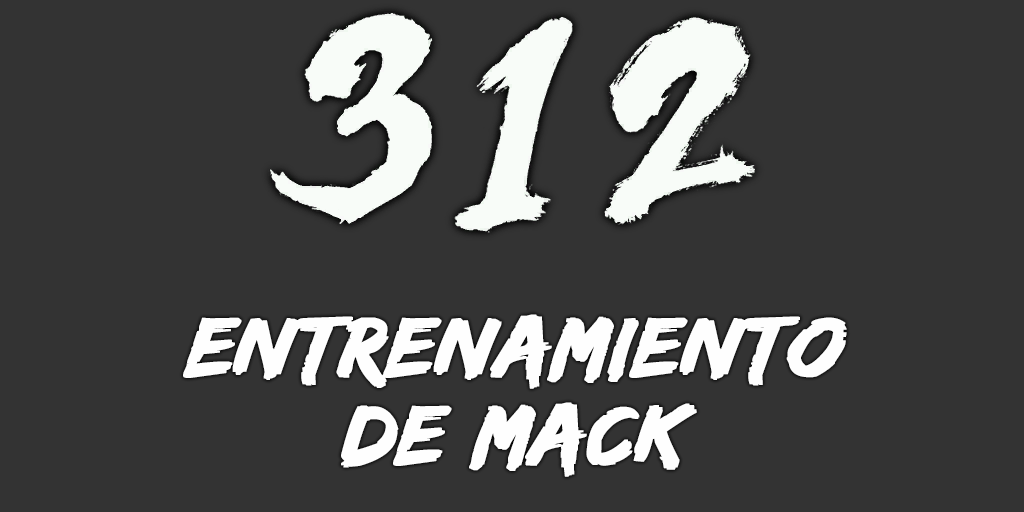
<style>
.page{position:relative;width:1024px;height:512px;background:#333333}
.page>*{position:absolute;margin:0}
.t1{font:88px/88px "EdoSZ";color:#fefefe;font-weight:bold;font-style:italic;scale:1.04 1}
</style>
<div class="page">
<p class="t1" style="left:183px;top:314px;width:664px;height:163px;text-align:center">entrenamiento<br>de mack</p>
</div>
